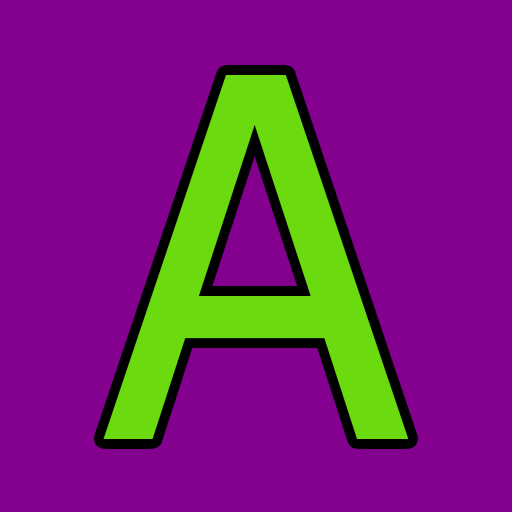
<style>
.page{position:relative;width:512px;height:512px;background:#84008f}
.page>*{position:absolute;margin:0}
.t1{font:500px "Tahoma";color:#6bdb0f}
</style>
<div class="page">
<p class="t1" style="left:103px;top:75px;width:306px;height:364px">A</p>
</div>
